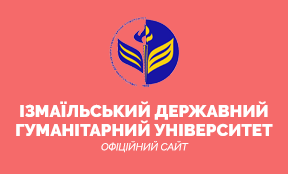
<style>
.page{position:relative;width:288px;height:174px;background:#f56a6a}
.page>*{position:absolute;margin:0}
.t1{font:17px/19px "Raleway-Black";color:#ffffff;text-transform:uppercase}
.t2{font:10px "Raleway-Regular";color:#ffffff;font-style:italic}
</style>
<div class="page">
<p class="t1" style="left:16px;top:101px;width:257px;height:35px;text-align:center">Ізмаїльський державний гуманітарний університет</p>
<p class="t2" style="left:101px;top:141px;width:88px;height:12px">ОФІЦІЙНИЙ САЙТ</p>
</div>
